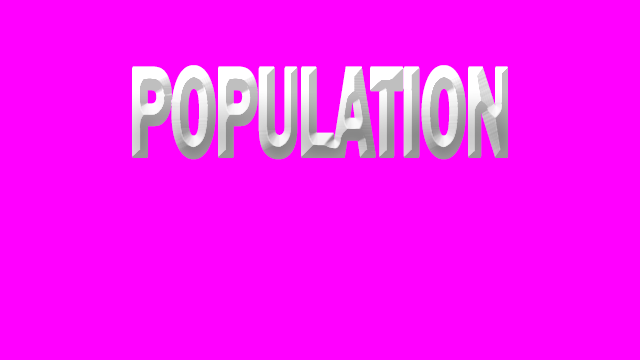
<style>
.page{position:relative;width:640px;height:360px;background:#ff00ff}
.page>*{position:absolute;margin:0}
.t1{font:131.6px "FranklinGothic-Heavy";letter-spacing:-0.05em;text-transform:uppercase;font-weight:bold;scale:0.51 1}
</style>
<div class="page">
<p class="t1" style="left:132px;top:65px;width:376px;height:95px">Population</p>
</div>
